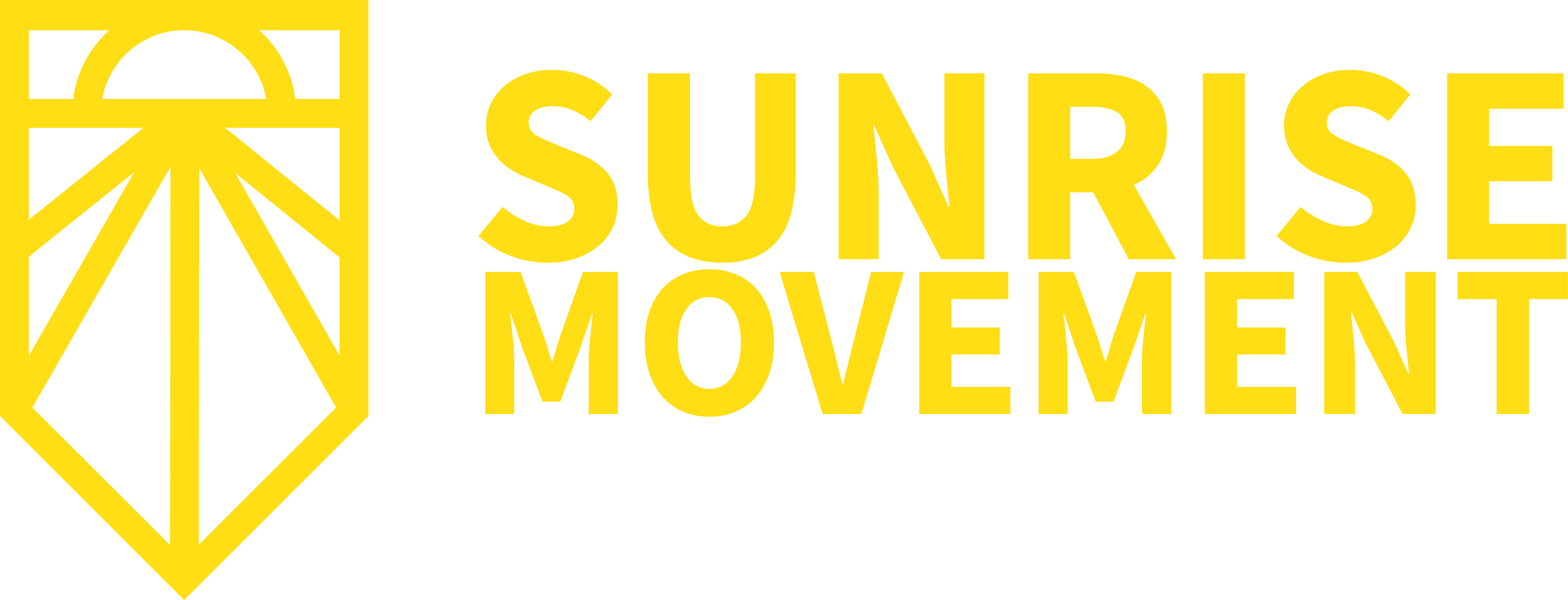
<style>
.page{position:relative;width:1568px;height:600px;background:#ffffff}
.page>*{position:absolute;margin:0}
.t1{font:217.8px/154.8px "SourceSansPro-Bold";color:#ffde16}
.t2{font:285px/204px "SourceSansPro-Bold";color:#ffde16}
</style>
<div class="page">
<p class="t1" style="left:478px;top:70px;width:1090px;height:347px"><span class="t2">SUNRISE<br></span>MOVEMENT</p>
</div>
